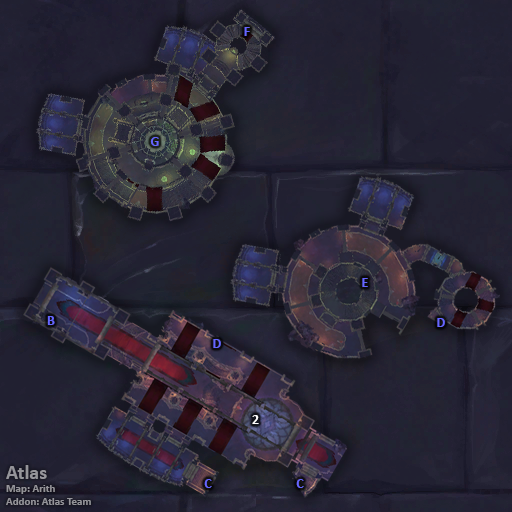
<style>
.page{position:relative;width:512px;height:512px}
.page>*{position:absolute;margin:0}
.t1{font:14px "Calibri-Bold";color:#6666ff}
.t2{font:14px "Calibri-Bold";color:#ffffff}
.t3{font:11px "Calibri-Bold";color:#949499}
.t4{font:20px "Calibri-Bold";color:#949499}
</style>
<div class="page">
<p class="t1" style="left:244px;top:27px;width:6px;height:9px">F</p>
<p class="t1" style="left:150px;top:137px;width:9px;height:9px">G</p>
<p class="t1" style="left:362px;top:278px;width:6px;height:9px">E</p>
<p class="t1" style="left:47px;top:316px;width:8px;height:9px">B</p>
<p class="t1" style="left:437px;top:318px;width:8px;height:9px">D</p>
<p class="t1" style="left:213px;top:339px;width:8px;height:9px">D</p>
<p class="t2" style="left:252px;top:415px;width:7px;height:9px">2</p>
<p class="t3" style="left:6px;top:465px;width:85px;height:40px"><span class="t4">Atlas<br></span>Map: Arith<br>Addon: Atlas Team</p>
<p class="t1" style="left:204px;top:479px;width:8px;height:9px">C</p>
<p class="t1" style="left:296px;top:479px;width:8px;height:9px">C</p>
</div>
